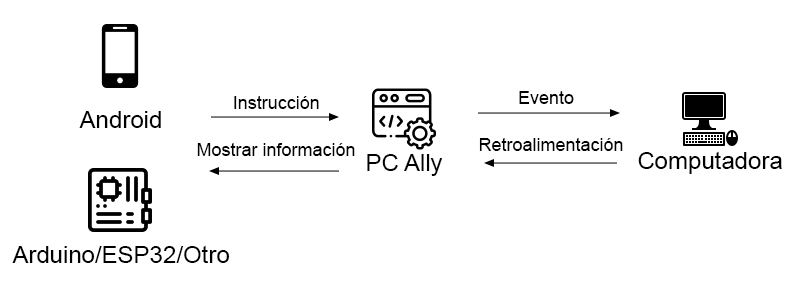
<style>
.page{position:relative;width:800px;height:301px;background:#ffffff}
.page>*{position:absolute;margin:0}
.t1{font:18px "ArialMT";color:#000000}
.t2{font:24px "ArialMT";color:#000000}
</style>
<div class="page">
<p class="t1" style="left:234px;top:96px;width:85px;height:13px">Instrucción</p>
<p class="t1" style="left:519px;top:91px;width:55px;height:13px">Evento</p>
<p class="t2" style="left:79px;top:111px;width:82px;height:17px">Android</p>
<p class="t1" style="left:197px;top:143px;width:158px;height:13px">Mostrar información</p>
<p class="t1" style="left:479px;top:138px;width:144px;height:13px">Retroalimentación</p>
<p class="t2" style="left:367px;top:154px;width:76px;height:22px">PC Ally</p>
<p class="t2" style="left:638px;top:151px;width:144px;height:23px">Computadora</p>
<p class="t2" style="left:12px;top:245px;width:218px;height:18px">Arduino/ESP32/Otro</p>
</div>
